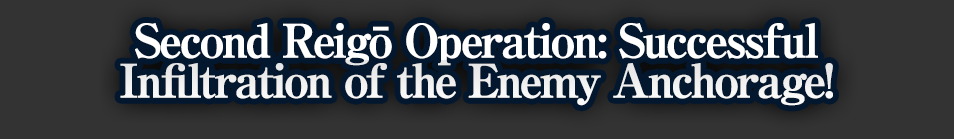
<style>
.page{position:relative;width:954px;height:139px;background:#333333}
.page>*{position:absolute;margin:0}
.t1{font:46px/40px "RyuminPro-ExBold";letter-spacing:-0.08em;color:#ffffff;font-weight:bold}
</style>
<div class="page">
<p class="t1" style="left:120px;top:23px;width:713px;height:83px;text-align:center">Second Reigō Operation: Successful<br>Infiltration of the Enemy Anchorage!</p>
</div>
